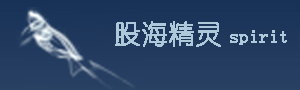
<style>
.page{position:relative;width:300px;height:90px}
.page>*{position:absolute;margin:0}
.t1{font:18px "YouYuan";color:#aec9d9;font-weight:bold}
.t2{font:26px "YouYuan";color:#aec9d9;font-weight:bold}
</style>
<div class="page">
<p class="t1" style="left:115px;top:21px;width:172px;height:26px"><span class="t2">股海精灵</span>spirit</p>
</div>
